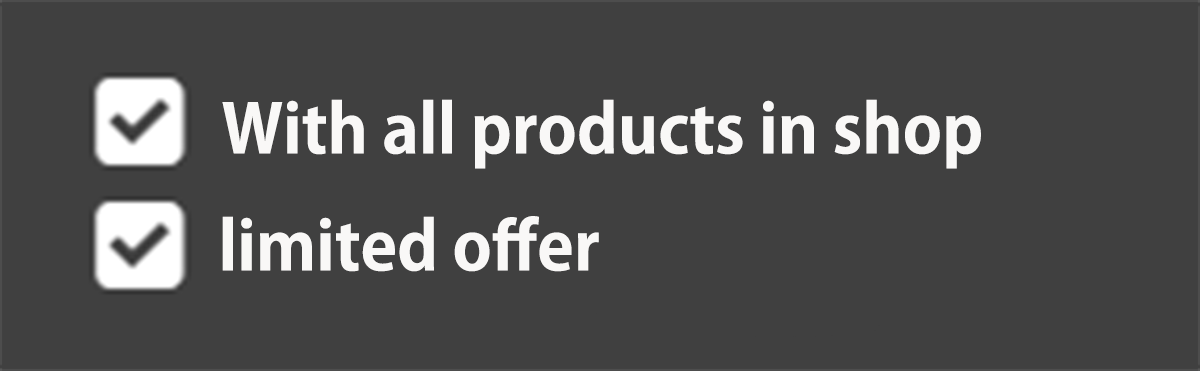
<style>
.page{position:relative;width:1200px;height:371px;background:#404040}
.page>*{position:absolute;margin:0}
.t1{font:66.7px "KozGoPr6N-Bold";color:#f9f8f7}
</style>
<div class="page">
<p class="t1" style="left:222px;top:99px;width:759px;height:70px">With all products in shop</p>
<p class="t1" style="left:222px;top:216px;width:377px;height:56px">limited offer</p>
</div>
